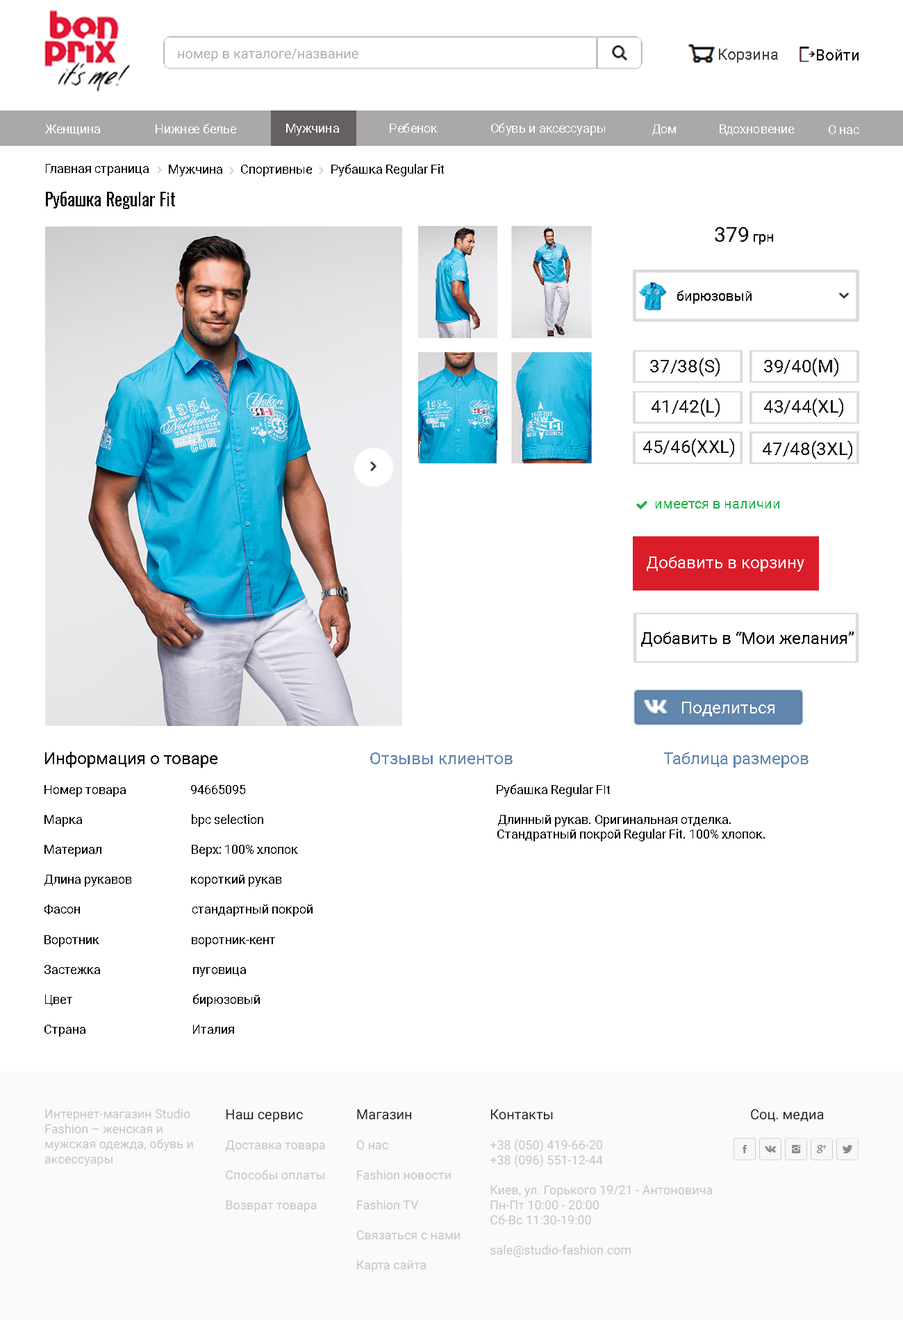
<style>
.page{position:relative;width:903px;height:1320px;background:#ffffff}
.page>*{position:absolute;margin:0}
.t1{font:13.9px "Roboto-Regular";color:#acacac}
.t2{font:15.3px "Roboto-Regular";color:#454343}
.t3{font:15.3px "Roboto-Regular";color:#090808}
.t4{font:12.5px "Roboto-Regular";color:#fffdfd}
.t5{font:12.5px "Roboto-Regular";color:#090808}
.t6{font:12.5px "Roboto-Regular";color:#0a0a0a}
.t7{font:18.1px "Oswald-Regular";color:#0a0a0a}
.t8{font:20.8px "Roboto-Regular";color:#0a0a0a}
.t9{font:13.9px "Roboto-Regular";color:#0a0a0a}
.t10{font:18.1px "Roboto-Regular";color:#1d1d1d}
.t11{font:13.9px "Roboto-Regular";color:#22b14c}
.t12{font:16.7px "Roboto-Regular";color:#fdfcfc}
.t13{font:16.7px "Roboto-Regular";color:#100303}
.t14{font:16.7px "Roboto-Regular";color:#fffcfc}
.t15{font:16.7px "Roboto-Regular";color:#050505}
.t16{font:16.7px "Roboto-Regular";color:#6287ae}
.t17{font:12.5px "Roboto-Regular";color:#050505}
.t18{font:12.5px "Roboto-Regular";color:#c7c4c4}
.t19{font:13.9px "Roboto-Regular";color:#1e1b1b}
</style>
<div class="page">
<p class="t1" style="left:178px;top:48px;width:181px;height:13px">номер в каталоге/название</p>
<p class="t2" style="left:719px;top:49px;width:59px;height:14px">Корзина</p>
<p class="t3" style="left:817px;top:49px;width:42px;height:11px">Войти</p>
<p class="t4" style="left:45px;top:124px;width:55px;height:11px">Женщина</p>
<p class="t4" style="left:156px;top:124px;width:80px;height:9px">Нижнее белье</p>
<p class="t4" style="left:286px;top:124px;width:53px;height:11px">Мужчина</p>
<p class="t4" style="left:390px;top:123px;width:48px;height:10px">Ребенок</p>
<p class="t4" style="left:491px;top:123px;width:114px;height:12px">Обувь и аксессуары</p>
<p class="t4" style="left:652px;top:124px;width:24px;height:11px">Дом</p>
<p class="t4" style="left:720px;top:124px;width:74px;height:11px">Вдохновение</p>
<p class="t4" style="left:829px;top:125px;width:30px;height:9px">О нас</p>
<p class="t5" style="left:46px;top:164px;width:103px;height:12px">Главная страница</p>
<p class="t5" style="left:169px;top:165px;width:53px;height:11px">Мужчина</p>
<p class="t6" style="left:241px;top:165px;width:71px;height:11px">Спортивные</p>
<p class="t6" style="left:331px;top:164px;width:113px;height:12px">Рубашка Regular Fit</p>
<p class="t7" style="left:46px;top:191px;width:129px;height:18px">Рубашка Regular Fit</p>
<p class="t8" style="left:715px;top:227px;width:58px;height:18px">379<span class="t9"> грн</span></p>
<p class="t9" style="left:677px;top:290px;width:75px;height:14px">бирюзовый</p>
<p class="t10" style="left:650px;top:358px;width:70px;height:19px">37/38(S)</p>
<p class="t10" style="left:764px;top:358px;width:75px;height:19px">39/40(M)</p>
<p class="t10" style="left:652px;top:398px;width:68px;height:19px">41/42(L)</p>
<p class="t10" style="left:764px;top:398px;width:80px;height:19px">43/44(XL)</p>
<p class="t10" style="left:643px;top:438px;width:91px;height:19px">45/46(XXL)</p>
<p class="t10" style="left:763px;top:441px;width:90px;height:18px">47/48(3XL)</p>
<p class="t11" style="left:656px;top:501px;width:124px;height:8px">имеется в наличии</p>
<p class="t12" style="left:647px;top:556px;width:158px;height:16px">Добавить в корзину</p>
<p class="t13" style="left:641px;top:632px;width:213px;height:15px">Добавить в “Мои желания”</p>
<p class="t14" style="left:682px;top:702px;width:93px;height:14px">Поделиться</p>
<p class="t15" style="left:45px;top:752px;width:172px;height:16px">Информация о товаре</p>
<p class="t16" style="left:370px;top:752px;width:143px;height:12px">Отзывы клиентов</p>
<p class="t16" style="left:664px;top:752px;width:145px;height:16px">Таблица размеров</p>
<p class="t17" style="left:44px;top:784px;width:721px;height:253px;text-align:right">Номер товара                       94665095                                                                                          Рубашка Regular FIt<br><br>Марка                                       bpc selection                                                                                    Длинный рукав. Оригинальная отделка.     <br>                                                                                                                                                                   Стандратный покрой Regular Fit. 100% хлопок.  <br>Материал                                Верх: 100% хлопок                                                                         <br><br>Длина рукавов                     короткий рукав <br><br>Фасон                                        стандартный покрой<br><br>Воротник                                 воротник-кент <br><br>Застежка                                 пуговица<br><br>Цвет                                           бирюзовый<br><br>Страна                                      Италия</p>
<p class="t18" style="left:45px;top:1109px;width:148px;height:58px;text-align:right">Интернет-магазин Studio <br>Fashion – женская и <br>мужская одежда, обувь и <br>аксессуары</p>
<p class="t18" style="left:225px;top:1109px;width:100px;height:103px;text-align:right"><span class="t19">Наш сервис<br></span><br>Доставка товара <br><br>Способы оплаты<br><br>Возврат товара</p>
<p class="t18" style="left:356px;top:1109px;width:104px;height:163px;text-align:right"><span class="t19">Магазин<br></span><br>О нас<br><br>Fashion новости<br><br>Fashion TV<br><br>Связаться с нами<br><br>Карта сайта</p>
<p class="t18" style="left:491px;top:1109px;width:222px;height:149px;text-align:right"><span class="t19">Контакты<br></span><br>+38 (050) 419-66-20<br>+38 (096) 551-12-44<br><br>Киев, ул. Горького 19/21 - Антоновича<br>Пн-Пт 10:00 - 20:00<br>Cб-Вс 11:30-19:00<br><br>sale@studio-fashion.com</p>
<p class="t19" style="left:751px;top:1109px;width:73px;height:13px">Соц. медиа</p>
</div>
